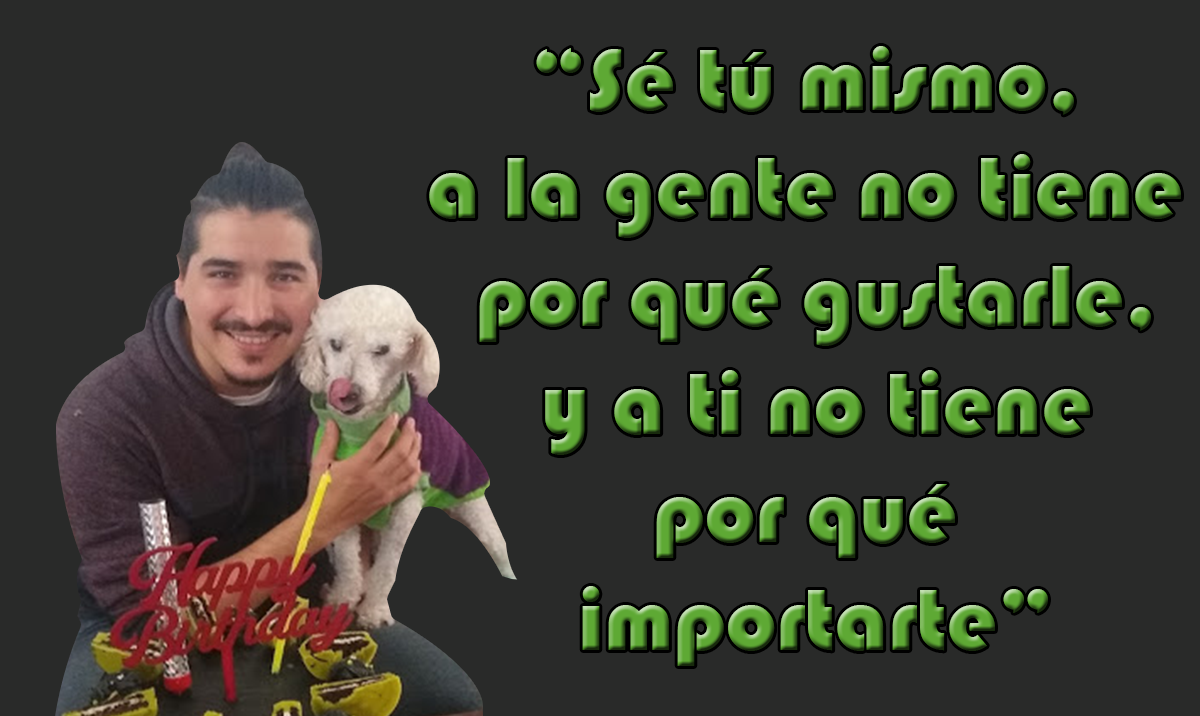
<style>
.page{position:relative;width:1200px;height:716px;background:#292a29}
.page>*{position:absolute;margin:0}
.t1{font:90px "Bauhaus93"}
</style>
<div class="page">
<p class="t1" style="left:429px;top:46px;width:752px;height:620px;text-align:center">“Sé tú mismo, <br>a la gente no tiene <br>por qué gustarle,<br> y a ti no tiene <br>por qué <br>importarte”</p>
</div>
